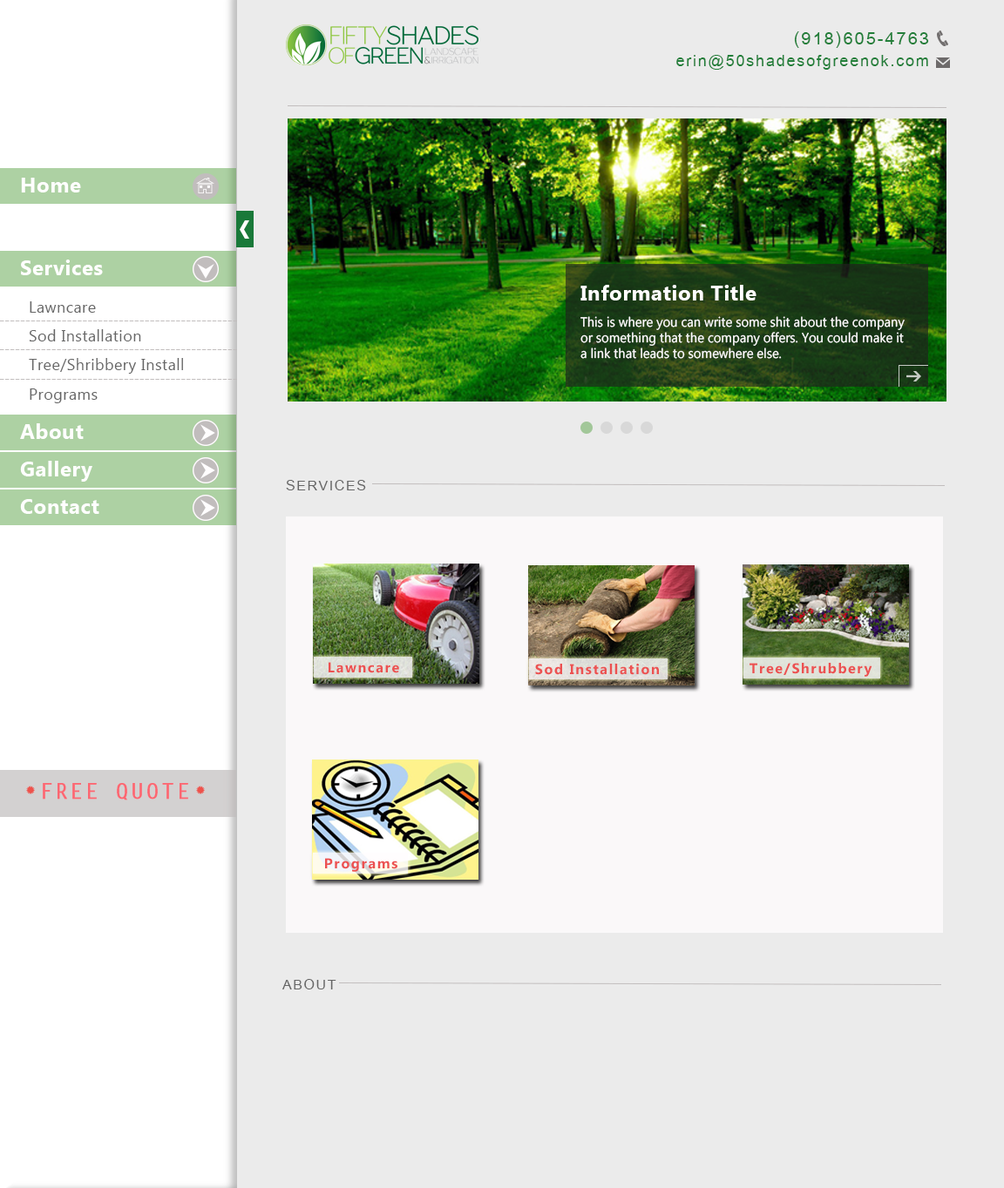
<style>
.page{position:relative;width:1004px;height:1188px;background:#ebebeb}
.page>*{position:absolute;margin:0}
.t1{font:17.4px "DokChampa";letter-spacing:0.1em;color:#237f3a}
.t2{font:15.7px "DokChampa";letter-spacing:0.1em;color:#237f3a}
.t3{font:20.9px "LaoUI-Bold";letter-spacing:0.025em;color:#fffefe}
.t4{font:15.7px "LaoUI";letter-spacing:0.025em;color:#666666}
.t5{font:13.2px "LaoUI";color:#fffefe}
.t6{font:13.9px "DokChampa";letter-spacing:0.1em;color:#666666}
.t7{font:14.1px "LaoUI-Bold";letter-spacing:0.1em;color:#ec5151}
.t8{font:20.9px "LetterGothicStd-Bold";letter-spacing:0.1em;color:#fd6671;font-weight:bold}
</style>
<div class="page">
<p class="t1" style="left:794px;top:31px;width:135px;height:17px">(918)605-4763</p>
<p class="t2" style="left:676px;top:55px;width:252px;height:15px">erin@50shadesofgreenok.com</p>
<p class="t3" style="left:21px;top:178px;width:60px;height:15px">Home</p>
<p class="t3" style="left:21px;top:260px;width:82px;height:15px">Services</p>
<p class="t3" style="left:580px;top:285px;width:176px;height:16px">Information Title</p>
<p class="t4" style="left:30px;top:301px;width:66px;height:12px">Lawncare</p>
<p class="t5" style="left:580px;top:316px;width:324px;height:43px;text-align:right">This is where you can write some shit about the company or something that the company offers. You could make it a link that leads to somewhere else.</p>
<p class="t4" style="left:29px;top:329px;width:112px;height:12px">Sod Installation</p>
<p class="t4" style="left:29px;top:358px;width:154px;height:16px">Tree/Shribbery Install</p>
<p class="t4" style="left:30px;top:389px;width:68px;height:14px">Programs</p>
<p class="t3" style="left:20px;top:423px;width:64px;height:16px">About</p>
<p class="t3" style="left:20px;top:461px;width:72px;height:21px">Gallery</p>
<p class="t6" style="left:286px;top:480px;width:80px;height:10px">SERVICES</p>
<p class="t3" style="left:20px;top:499px;width:79px;height:15px">Contact</p>
<p class="t7" style="left:328px;top:662px;width:71px;height:11px">Lawncare</p>
<p class="t7" style="left:535px;top:664px;width:124px;height:11px">Sod Installation</p>
<p class="t7" style="left:749px;top:663px;width:123px;height:14px">Tree/Shrubbery</p>
<p class="t8" style="left:43px;top:783px;width:145px;height:18px">FREE QUOTE</p>
<p class="t7" style="left:325px;top:858px;width:72px;height:14px">Programs</p>
<p class="t6" style="left:282px;top:979px;width:54px;height:11px">ABOUT</p>
</div>
